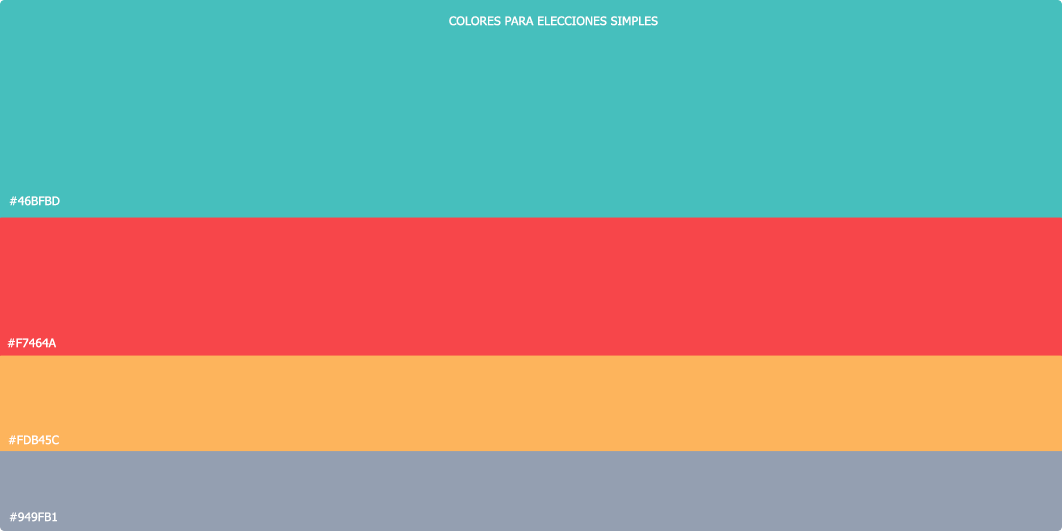
<style>
.page{position:relative;width:1062px;height:531px;background:#46bfbd}
.page>*{position:absolute;margin:0}
.t1{font:11.7px "Tahoma";letter-spacing:0.01em;color:#ffffff;text-transform:uppercase}
</style>
<div class="page">
<p class="t1" style="left:449px;top:16px;width:209px;height:10px">COlores Para Elecciones simples</p>
<p class="t1" style="left:9px;top:196px;width:51px;height:10px">#46bfbd</p>
<p class="t1" style="left:7px;top:338px;width:49px;height:10px">#f7464a</p>
<p class="t1" style="left:8px;top:435px;width:51px;height:10px">#fdb45c</p>
<p class="t1" style="left:9px;top:512px;width:48px;height:10px">#949fb1</p>
</div>
